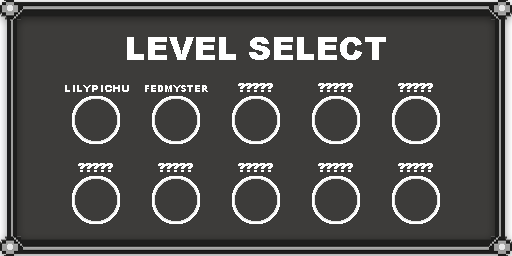
<style>
.page{position:relative;width:512px;height:256px;background:#3d3c3a}
.page>*{position:absolute;margin:0}
.t1{font:32px "Arial-Black";color:#ffffff}
.t2{font:10px "Arial-Black";color:#ffffff;scale:1.11 1}
.t3{font:10px "Arial-Black";color:#ffffff;scale:0.92 1}
.t4{font:12px "Arial-Black";color:#ffffff;scale:0.92 1}
</style>
<div class="page">
<p class="t1" style="left:127px;top:37px;width:259px;height:23px">LEVEL SELECT</p>
<p class="t2" style="left:65px;top:85px;width:64px;height:7px">LILYPICHU</p>
<p class="t3" style="left:145px;top:85px;width:63px;height:7px">FEDMYSTER</p>
<p class="t4" style="left:238px;top:83px;width:35px;height:9px">?????</p>
<p class="t4" style="left:318px;top:83px;width:35px;height:9px">?????</p>
<p class="t4" style="left:318px;top:83px;width:35px;height:9px">?????</p>
<p class="t4" style="left:398px;top:83px;width:35px;height:9px">?????</p>
<p class="t4" style="left:78px;top:163px;width:35px;height:9px">?????</p>
<p class="t4" style="left:158px;top:163px;width:35px;height:9px">?????</p>
<p class="t4" style="left:238px;top:163px;width:35px;height:9px">?????</p>
<p class="t4" style="left:318px;top:163px;width:35px;height:9px">?????</p>
<p class="t4" style="left:398px;top:163px;width:35px;height:9px">?????</p>
</div>
